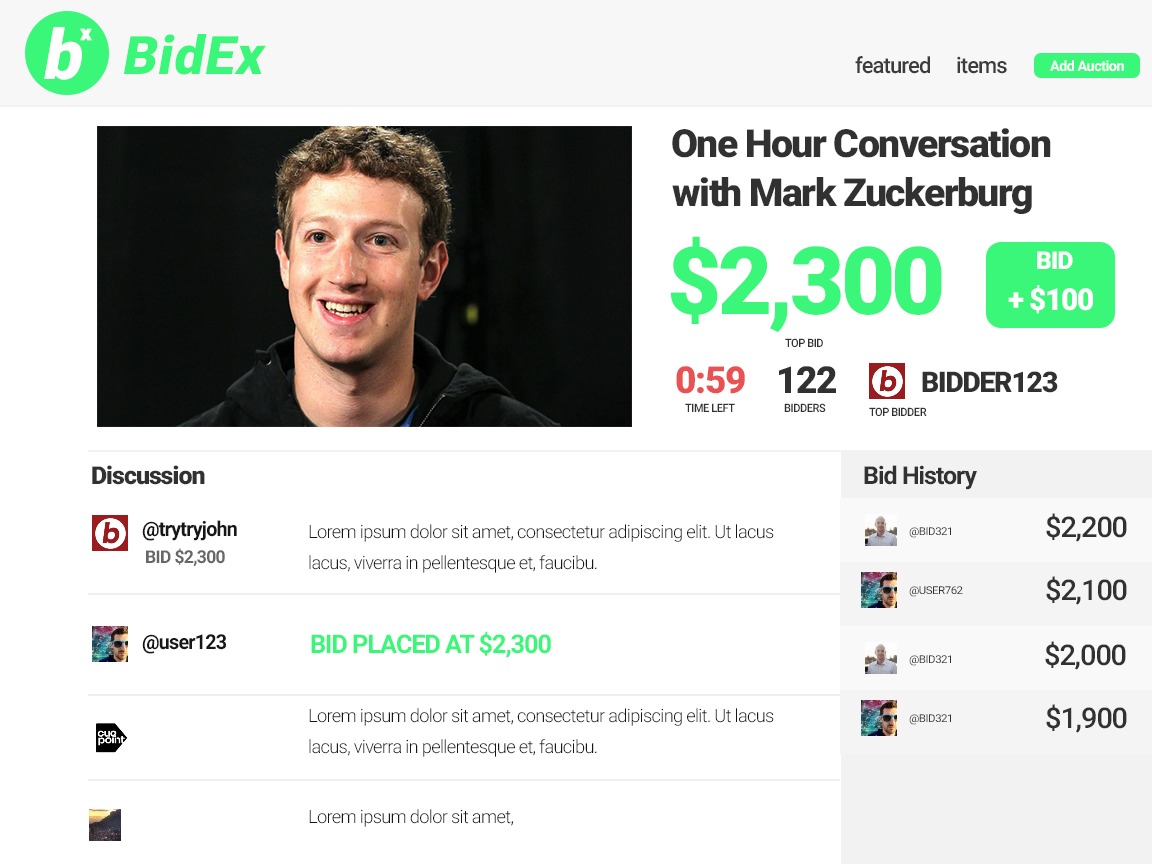
<style>
.page{position:relative;width:1152px;height:864px;background:#ffffff}
.page>*{position:absolute;margin:0}
.t1{font:69.3px "Roboto-Black";letter-spacing:-0.06em;color:#ffffff;font-style:italic}
.t2{font:21.3px "Roboto-Black";letter-spacing:-0.06em;color:#ffffff;font-weight:bold}
.t3{font:53.3px "Roboto-Black";letter-spacing:0.02em;color:#3bf779;font-style:italic}
.t4{font:22.2px "Roboto-Medium";letter-spacing:-0.04em;color:#3c3c3c}
.t5{font:14.4px "Roboto-Bold";letter-spacing:-0.04em;color:#ffffff}
.t6{font:38.8px "Roboto-Black";letter-spacing:-0.04em;color:#313131}
.t7{font:94.1px "Roboto-Black";letter-spacing:-0.04em;color:#3bf779}
.t8{font:24.9px "Roboto-Black";letter-spacing:-0.04em;color:#ffffff}
.t9{font:30.2px "Roboto-Black";letter-spacing:-0.04em;color:#ffffff}
.t10{font:11.5px "Roboto-Medium";letter-spacing:-0.04em;color:#313131;scale:0.95 1}
.t11{font:37.3px "Roboto-Black";letter-spacing:-0.04em;color:#e95252}
.t12{font:37.3px "Roboto-Black";letter-spacing:-0.04em;color:#313131}
.t13{font:28.4px "Roboto-Black";letter-spacing:-0.04em;color:#313131}
.t14{font:24.9px "Roboto-Black";letter-spacing:-0.04em;color:#313131}
.t15{font:24.9px "Roboto-Bold";letter-spacing:-0.04em;color:#313131}
.t16{font:20.4px "Roboto-Bold";letter-spacing:-0.04em;color:#171717;scale:0.96 1}
.t17{font:28.4px "Roboto-Medium";letter-spacing:-0.04em;color:#313131}
.t18{font:18.4px/31px "Roboto-Light";letter-spacing:-0.04em;color:#171717}
.t19{font:10.7px "Roboto-Regular";letter-spacing:-0.04em;color:#313131;scale:1.07 1}
.t20{font:17.8px "Roboto-Bold";letter-spacing:-0.04em;color:#676767}
.t21{font:25.7px "Roboto-Bold";letter-spacing:-0.04em;color:#3bf779}
.t22{font:18.4px "Roboto-Light";letter-spacing:-0.04em;color:#171717}
</style>
<div class="page">
<p class="t1" style="left:44px;top:27px;width:38px;height:53px">b</p>
<p class="t2" style="left:80px;top:28px;width:12px;height:13px">x</p>
<p class="t3" style="left:124px;top:34px;width:142px;height:41px">BidEx</p>
<p class="t4" style="left:855px;top:56px;width:75px;height:18px">featured</p>
<p class="t4" style="left:957px;top:56px;width:50px;height:18px">items</p>
<p class="t5" style="left:1050px;top:60px;width:74px;height:12px">Add Auction</p>
<p class="t6" style="left:672px;top:128px;width:379px;height:30px">One Hour Conversation</p>
<p class="t6" style="left:672px;top:177px;width:360px;height:37px">with Mark Zuckerburg</p>
<p class="t7" style="left:670px;top:236px;width:272px;height:96px">$2,300</p>
<p class="t8" style="left:1037px;top:251px;width:36px;height:18px">BID</p>
<p class="t9" style="left:1008px;top:285px;width:85px;height:29px">+ $100</p>
<p class="t10" style="left:785px;top:338px;width:38px;height:9px">TOP BID</p>
<p class="t11" style="left:676px;top:366px;width:69px;height:28px">0:59</p>
<p class="t12" style="left:779px;top:366px;width:57px;height:27px">122</p>
<p class="t13" style="left:922px;top:371px;width:136px;height:22px">BIDDER123</p>
<p class="t10" style="left:685px;top:403px;width:50px;height:9px">TIME LEFT</p>
<p class="t10" style="left:784px;top:403px;width:42px;height:9px">BIDDERS</p>
<p class="t10" style="left:869px;top:407px;width:58px;height:9px">TOP BIDDER</p>
<p class="t14" style="left:92px;top:465px;width:113px;height:20px">Discussion</p>
<p class="t15" style="left:864px;top:465px;width:113px;height:25px">Bid History</p>
<p class="t16" style="left:142px;top:520px;width:95px;height:21px">@trytryjohn</p>
<p class="t17" style="left:1046px;top:513px;width:81px;height:29px">$2,200</p>
<p class="t18" style="left:309px;top:524px;width:465px;height:49px">Lorem ipsum dolor sit amet, consectetur adipiscing elit. Ut lacus lacus, viverra in pellentesque et, faucibu.</p>
<p class="t19" style="left:909px;top:527px;width:42px;height:11px">@BIvD321</p>
<p class="t20" style="left:146px;top:548px;width:79px;height:19px">BID $2,300</p>
<p class="t17" style="left:1046px;top:576px;width:81px;height:29px">$2,100</p>
<p class="t19" style="left:909px;top:586px;width:54px;height:11px">@USERvbvvvvvvvvvcwu762</p>
<p class="t16" style="left:142px;top:634px;width:84px;height:20px">@user123</p>
<p class="t21" style="left:311px;top:631px;width:240px;height:27px">BID PLACED AT $2,300</p>
<p class="t17" style="left:1045px;top:641px;width:81px;height:29px">$2,000</p>
<p class="t19" style="left:909px;top:655px;width:42px;height:11px">@BIvD321</p>
<p class="t18" style="left:309px;top:708px;width:465px;height:49px">Lorem ipsum dolor sit amet, consectetur adipiscing elit. Ut lacus lacus, viverra in pellentesque et, faucibu.</p>
<p class="t17" style="left:1046px;top:704px;width:81px;height:29px">$1,900</p>
<p class="t19" style="left:909px;top:714px;width:42px;height:11px">@BIvD321</p>
<p class="t22" style="left:309px;top:809px;width:204px;height:18px">Lorem ipsum dolor sit amet,</p>
</div>
